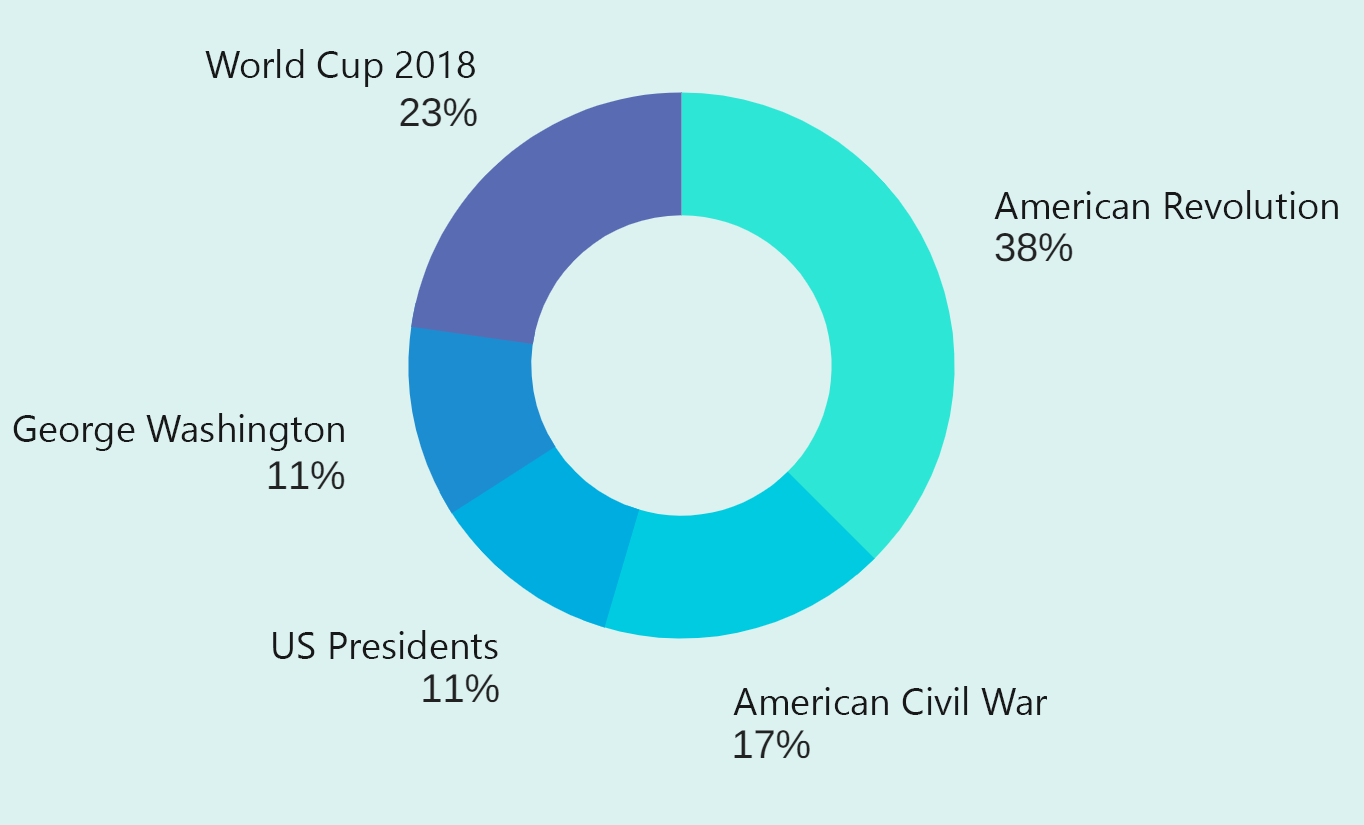
<style>
.page{position:relative;width:1364px;height:825px;background:#dbf2f0}
.page>*{position:absolute;margin:0}
.t1{font:38px "SegoeUI";color:#181818}
</style>
<div class="page">
<p class="t1" style="left:205px;top:49px;width:270px;height:38px">World Cup 2018</p>
<p class="t1" style="left:994px;top:190px;width:344px;height:29px">American Revolution</p>
<p class="t1" style="left:13px;top:413px;width:331px;height:38px">George Washington</p>
<p class="t1" style="left:273px;top:630px;width:225px;height:29px">US Presidents</p>
<p class="t1" style="left:733px;top:686px;width:314px;height:29px">American Civil War</p>
</div>
